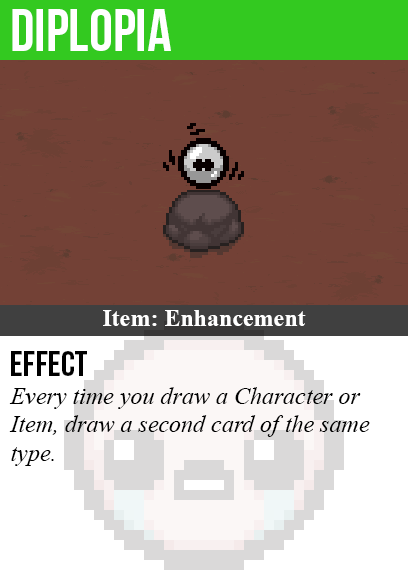
<style>
.page{position:relative;width:408px;height:585px;background:#734136}
.page>*{position:absolute;margin:0}
.t1{font:60px "BebasNeue";color:#ffffff}
.t2{font:24px "TimesNewRomanPS-BoldMT";color:#ffffff}
.t3{font:36px "BebasNeue";color:#000000}
.t4{font:24px "TimesNewRomanPS-ItalicMT";color:#000000}
</style>
<div class="page">
<p class="t1" style="left:12px;top:9px;width:159px;height:42px">diplopia</p>
<p class="t2" style="left:103px;top:310px;width:203px;height:16px">Item: Enhancement</p>
<p class="t3" style="left:11px;top:351px;width:76px;height:25px">Effect</p>
<p class="t4" style="left:9px;top:387px;width:361px;height:79px">Every time you draw a Character or<br>Item, draw a second card of the same<br>type.</p>
</div>
